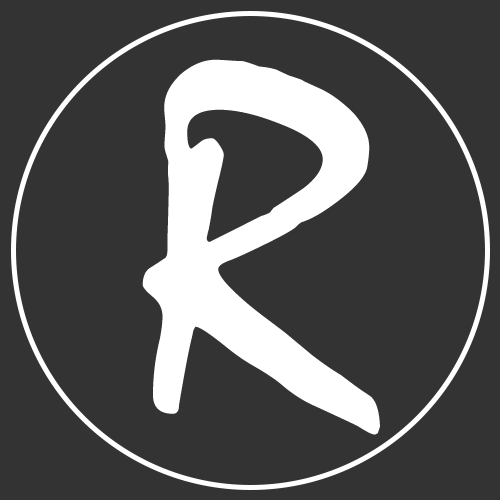
<style>
.page{position:relative;width:500px;height:500px;background:#333333}
.page>*{position:absolute;margin:0}
.t1{font:512px "Mistral";color:#ffffff}
</style>
<div class="page">
<p class="t1" style="left:142px;top:59px;width:238px;height:376px">R</p>
</div>
